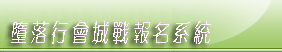
<style>
.page{position:relative;width:282px;height:52px}
.page>*{position:absolute;margin:0}
.t1{font:24px "FZZQFW--GB1-0";letter-spacing:0.2em;color:#ffecfe;font-style:italic;scale:0.7 1}
</style>
<div class="page">
<p class="t1" style="left:11px;top:21px;width:200px;height:23px">堕落行会城战报名系统</p>
</div>
